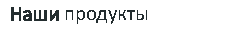
<style>
.page{position:relative;width:240px;height:30px;background:#ffffff}
.page>*{position:absolute;margin:0}
.t1{font:21.4px "Calibri";color:#232d2f;scale:0.97 1}
.t2{font:21.4px "Calibri";color:#232d2f;font-weight:bold;scale:0.97 1}
</style>
<div class="page">
<p class="t1" style="left:11px;top:7px;width:136px;height:17px"><span class="t2">Наши</span> продукты</p>
</div>
